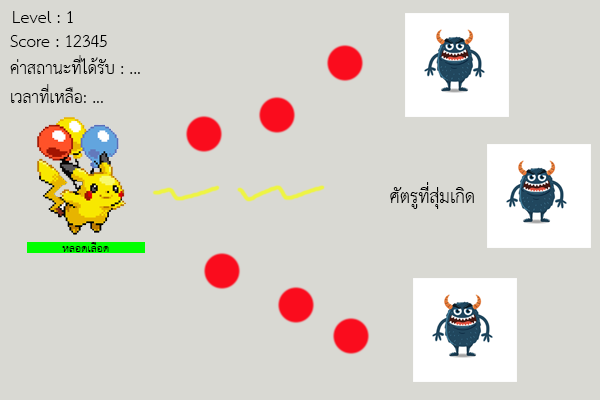
<style>
.page{position:relative;width:600px;height:400px;background:#d9d9d3}
.page>*{position:absolute;margin:0}
.t1{font:24px "THSarabunNew";color:#000000}
.t2{font:26px "THSarabunNew";color:#000000}
.t3{font:16px "THSarabunNew";color:#000000}
</style>
<div class="page">
<p class="t1" style="left:13px;top:11px;width:60px;height:12px">Level : 1</p>
<p class="t1" style="left:10px;top:35px;width:97px;height:12px">Score : 12345</p>
<p class="t1" style="left:10px;top:55px;width:130px;height:48px">ค่าสถานะที่ได้รับ : ...<br>เวลาที่เหลือ: ...</p>
<p class="t2" style="left:390px;top:182px;width:84px;height:27px">ศัตรูที่สุ่มเกิด</p>
<p class="t3" style="left:62px;top:242px;width:47px;height:10px">หลอดเลือด</p>
</div>
